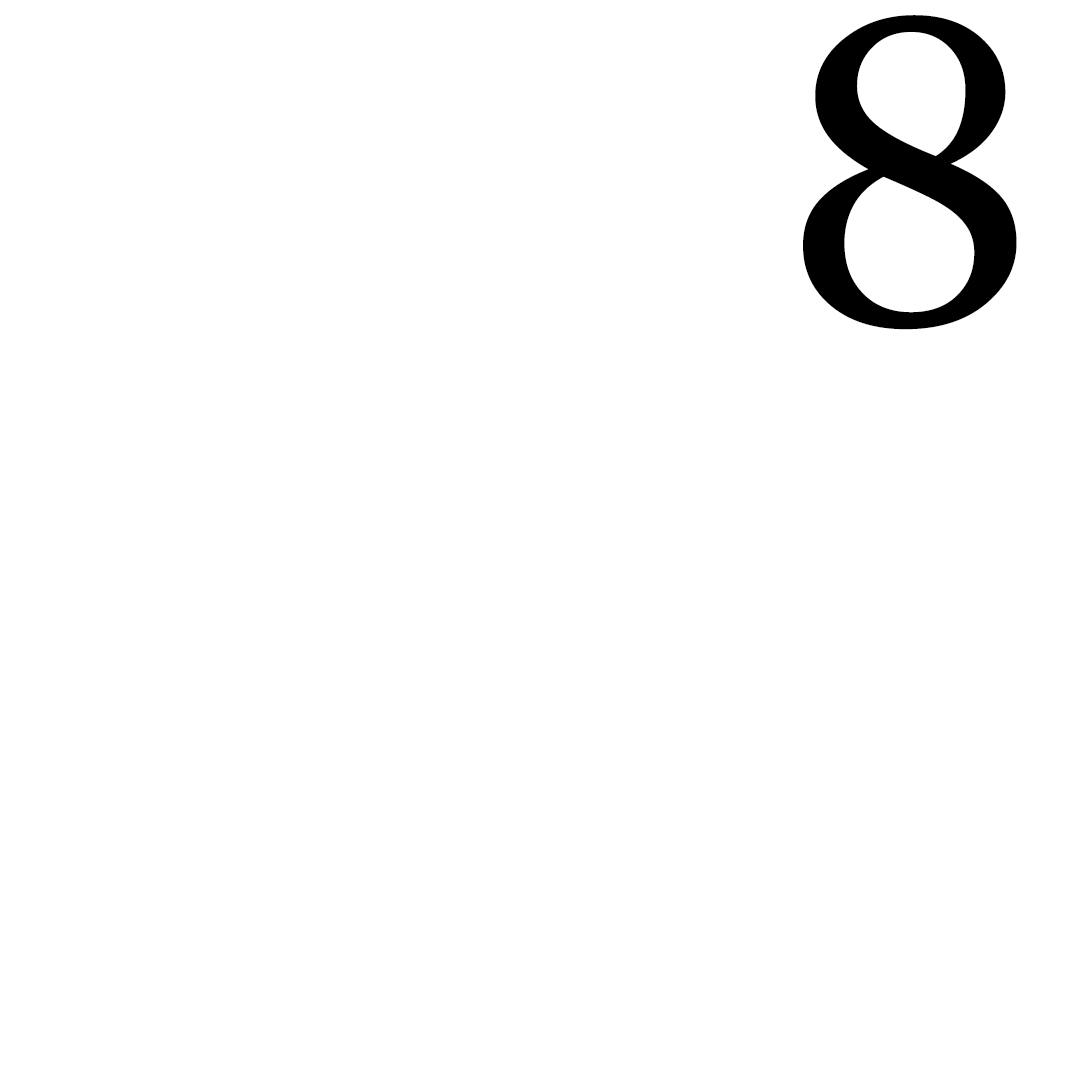
<style>
.page{position:relative;width:1080px;height:1080px;background:#ffffff}
.page>*{position:absolute;margin:0}
.t1{font:431.4px "Georgia";color:#000000}
</style>
<div class="page">
<p class="t1" style="left:803px;top:15px;width:214px;height:315px">8</p>
</div>
